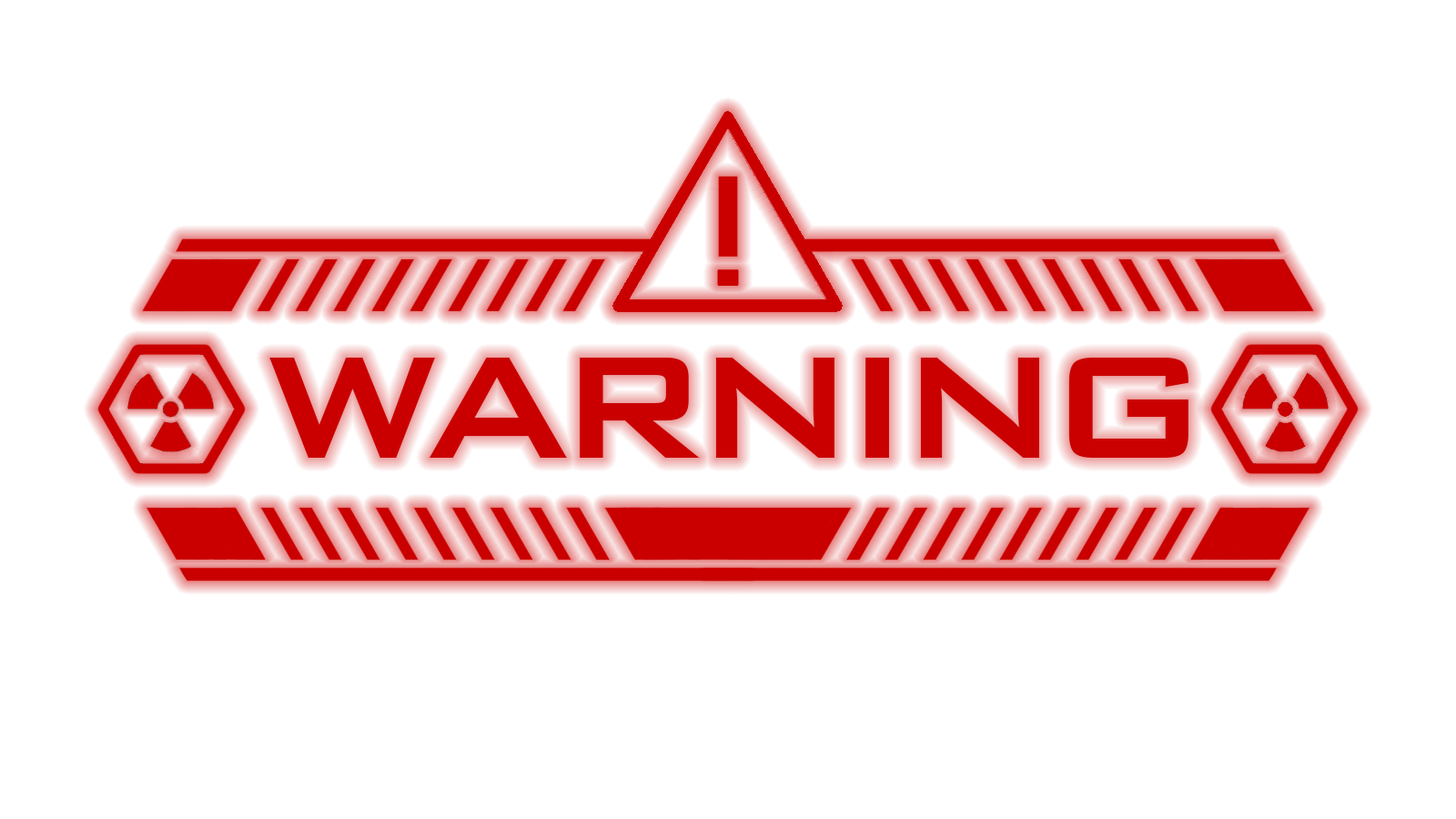
<style>
.page{position:relative;width:1456px;height:819px;background:#ffffff}
.page>*{position:absolute;margin:0}
.t1{font:194.7px "BankGothicBT-Medium";letter-spacing:-0.1em;color:#ca0000}
</style>
<div class="page">
<p class="t1" style="left:269px;top:358px;width:919px;height:100px">WARNING</p>
</div>
